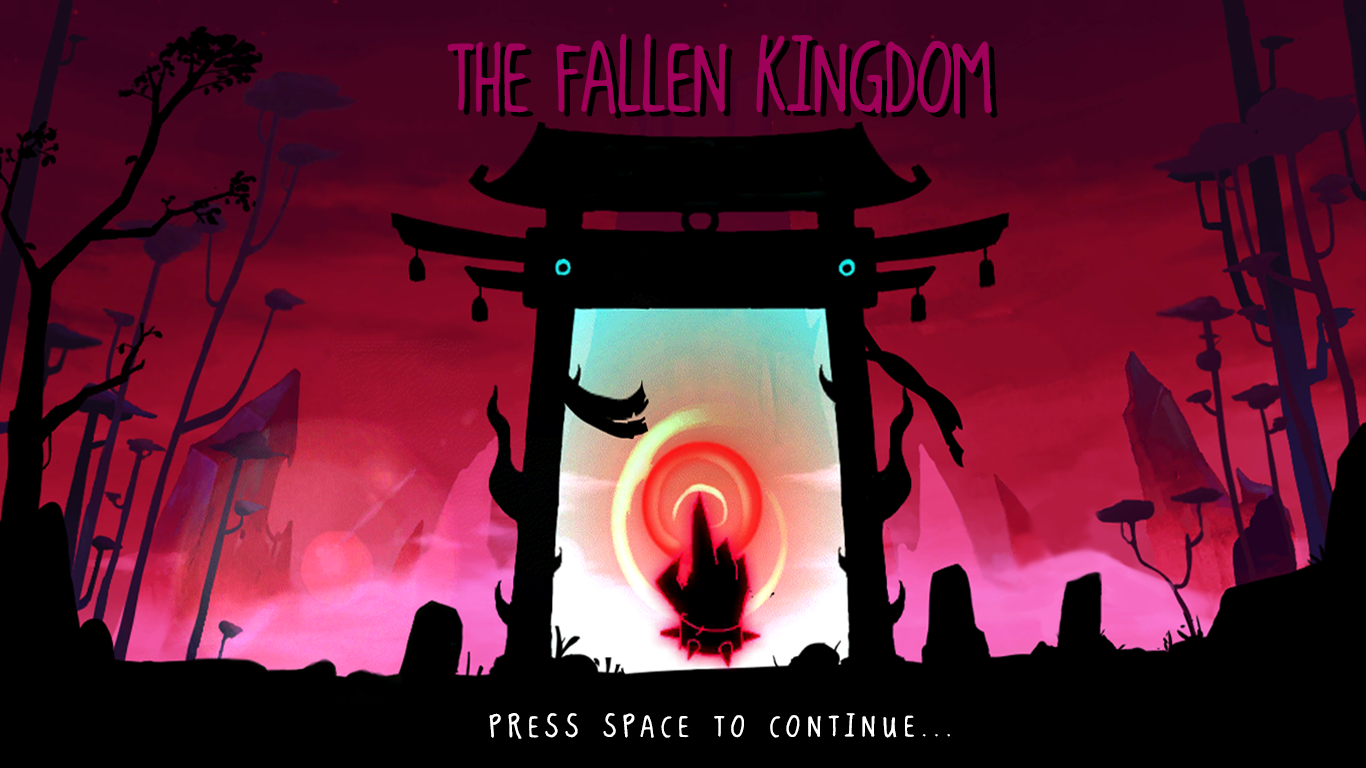
<style>
.page{position:relative;width:1366px;height:768px;background:#000000}
.page>*{position:absolute;margin:0}
.t1{font:95px "kingcooLKC";color:#9f005a}
.t2{font:95px "kingcooLKC";color:#000000}
.t3{font:28.9px "kingcooLKC";letter-spacing:0.21em;color:#ffffff;scale:1.25 1}
</style>
<div class="page">
<p class="t1" style="left:447px;top:34px;width:545px;height:80px">THE FALLEN KINGDOM</p>
<p class="t2" style="left:453px;top:38px;width:545px;height:81px">THE FALLEN KINGDOM</p>
<p class="t3" style="left:489px;top:713px;width:461px;height:26px">PRESS SPACE TO CONTINUE...</p>
</div>
